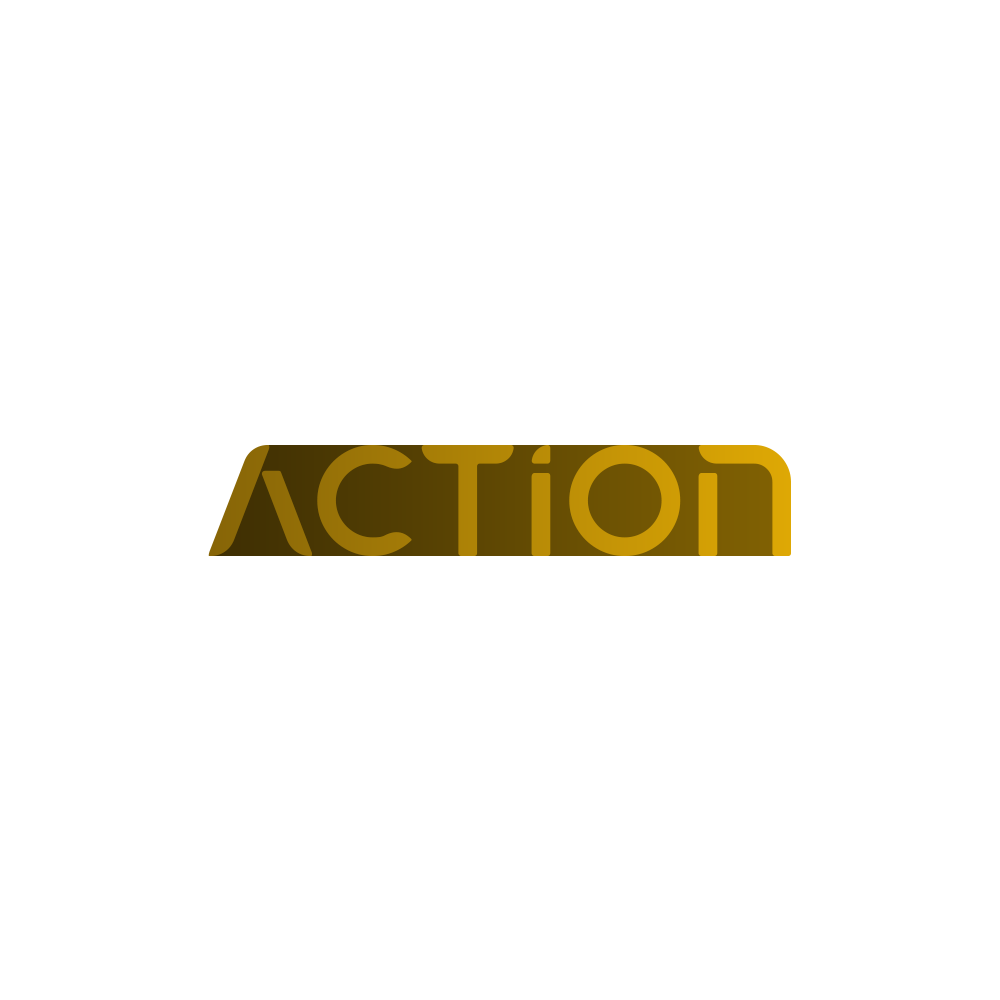
<style>
.page{position:relative;width:1000px;height:1000px;background:#ffffff}
.page>*{position:absolute;margin:0}
.t1{font:158.3px "Elounda-Regular"}
</style>
<div class="page">
<p class="t1" style="left:208px;top:445px;width:583px;height:111px">Action</p>
</div>
